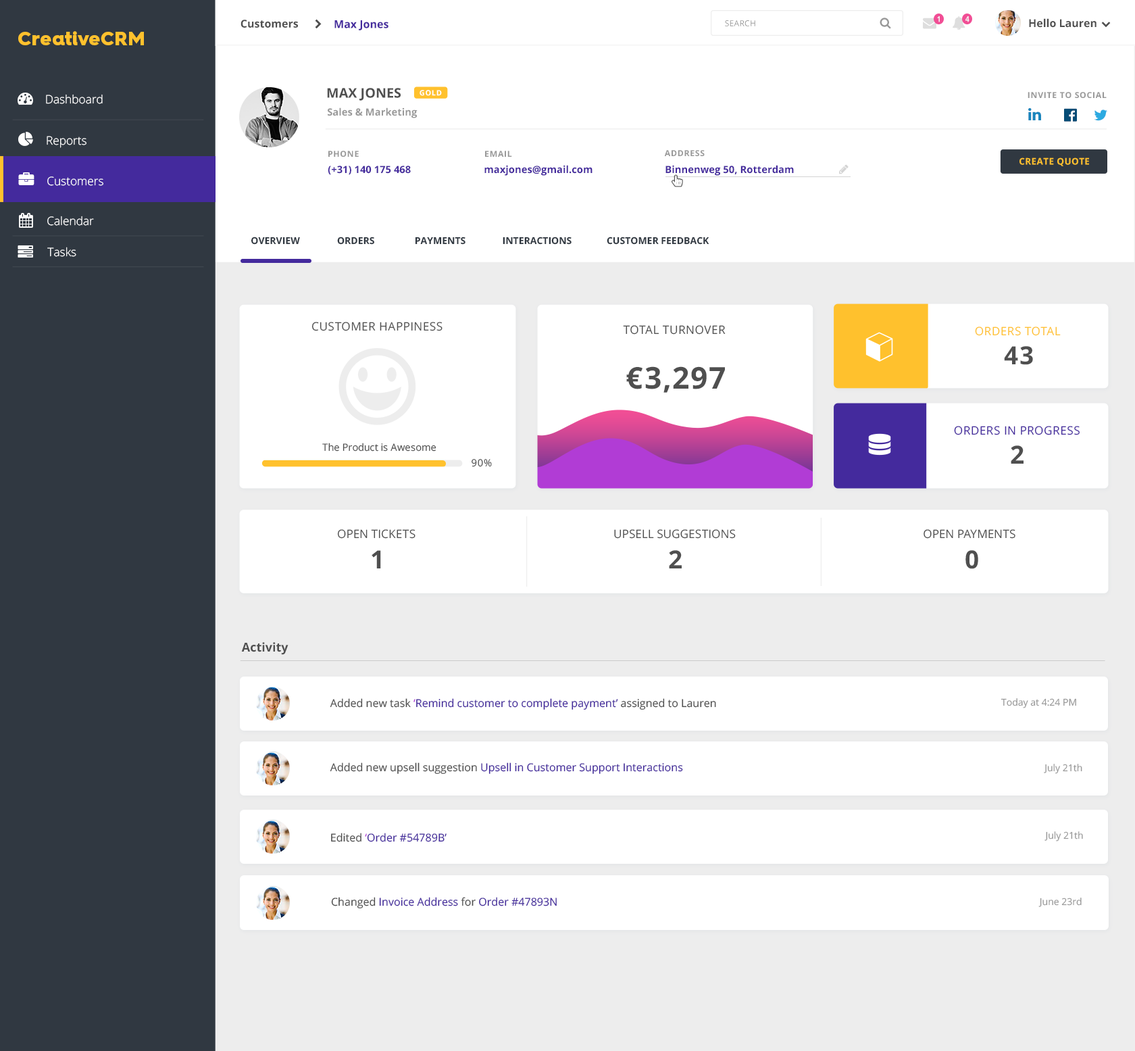
<style>
.page{position:relative;width:1135px;height:1051px;background:#ffffff}
.page>*{position:absolute;margin:0}
.t1{font:7.8px "OpenSans-Bold";color:#f4f4f4;scale:0.9 1}
.t2{font:10.8px "OpenSans-Bold";color:#4f4f4f}
.t3{font:10.8px "OpenSans-Bold";color:#442a9d}
.t4{font:8.1px "OpenSans";letter-spacing:0.025em;color:#999999;text-transform:uppercase}
.t5{font:18.9px "HurmeGeometricSans4-Black";letter-spacing:0.025em;color:#ffc12d}
.t6{font:13.4px "OpenSans-Bold";color:#4f4f4f;text-transform:uppercase}
.t7{font:7.5px "OpenSans-Bold";letter-spacing:0.05em;color:#ffffff;text-transform:uppercase}
.t8{font:11.7px "OpenSans-Light";color:#ffffff}
.t9{font:8.3px "OpenSans-Bold";letter-spacing:0.05em;color:#999999;text-transform:uppercase}
.t10{font:10px "OpenSans-Bold";color:#999999}
.t11{font:9.2px "OpenSans-Bold";letter-spacing:0.025em;color:#ffc12d;text-transform:uppercase}
.t12{font:10px "OpenSans-Bold";color:#442a9d}
.t13{font:9.5px "OpenSans-Bold";color:#303841;text-transform:uppercase}
.t14{font:11.7px "OpenSans";letter-spacing:0.025em;color:#4f4f4f;text-transform:uppercase}
.t15{font:11.7px "OpenSans";letter-spacing:0.025em;color:#ffc12d;text-transform:uppercase}
.t16{font:25px "OpenSans-Bold";letter-spacing:0.025em;color:#4f4f4f}
.t17{font:30px "OpenSans-Bold";letter-spacing:0.025em;color:#4f4f4f}
.t18{font:11.7px "OpenSans";letter-spacing:0.025em;color:#442a9d;text-transform:uppercase}
.t19{font:10px "OpenSans";color:#4f4f4f}
.t20{font:25px "OpenSans-Bold";color:#4f4f4f}
.t21{font:10px "OpenSans";letter-spacing:0.04em;color:#4f4f4f}
.t22{font:11.7px "OpenSans";color:#4f4f4f;text-transform:uppercase}
.t23{font:12.2px "OpenSans-Bold";color:#4f4f4f}
.t24{font:10.8px "OpenSans";color:#442a9d}
.t25{font:10.8px "OpenSans";color:#4f4f4f}
.t26{font:10.8px "OpenSans";color:#b13cd5}
.t27{font:9.5px "OpenSans";color:#999999}
</style>
<div class="page">
<p class="t1" style="left:937px;top:16px;width:3px;height:6px">1</p>
<p class="t1" style="left:965px;top:16px;width:5px;height:6px">4</p>
<p class="t2" style="left:241px;top:20px;width:57px;height:8px">Customers</p>
<p class="t3" style="left:334px;top:20px;width:54px;height:10px">Max Jones</p>
<p class="t4" style="left:725px;top:20px;width:30px;height:6px">Search</p>
<p class="t2" style="left:1029px;top:18px;width:68px;height:10px">Hello Lauren</p>
<p class="t5" style="left:18px;top:31px;width:126px;height:14px">CreativeCRM</p>
<p class="t6" style="left:327px;top:88px;width:74px;height:13px">Max Jones</p>
<p class="t7" style="left:420px;top:90px;width:22px;height:6px">gold</p>
<p class="t8" style="left:46px;top:94px;width:57px;height:10px">Dashboard</p>
<p class="t9" style="left:1028px;top:92px;width:79px;height:6px">Invite to social</p>
<p class="t10" style="left:328px;top:107px;width:90px;height:11px">Sales &amp; Marketing</p>
<p class="t8" style="left:47px;top:136px;width:39px;height:12px">Reports</p>
<p class="t9" style="left:664px;top:150px;width:41px;height:6px">Address</p>
<p class="t9" style="left:328px;top:151px;width:31px;height:6px">phone</p>
<p class="t9" style="left:485px;top:151px;width:27px;height:6px">email</p>
<p class="t11" style="left:1019px;top:157px;width:70px;height:9px">create quote</p>
<p class="t12" style="left:328px;top:166px;width:83px;height:9px">(+31) 140 175 468</p>
<p class="t12" style="left:484px;top:165px;width:109px;height:11px">maxjones@gmail.com</p>
<p class="t12" style="left:665px;top:165px;width:129px;height:11px">Binnenweg 50, Rotterdam</p>
<p class="t8" style="left:47px;top:176px;width:56px;height:10px">Customers</p>
<p class="t8" style="left:47px;top:216px;width:47px;height:10px">Calendar</p>
<p class="t13" style="left:251px;top:236px;width:49px;height:9px">Overview</p>
<p class="t13" style="left:337px;top:236px;width:37px;height:9px">Orders</p>
<p class="t13" style="left:415px;top:236px;width:50px;height:9px">Payments</p>
<p class="t13" style="left:503px;top:236px;width:69px;height:9px">Interactions</p>
<p class="t13" style="left:607px;top:236px;width:102px;height:9px">Customer Feedback</p>
<p class="t8" style="left:47px;top:247px;width:29px;height:10px">Tasks</p>
<p class="t14" style="left:311px;top:322px;width:132px;height:9px">customer happiness</p>
<p class="t14" style="left:623px;top:325px;width:103px;height:9px">total turnover</p>
<p class="t15" style="left:975px;top:326px;width:86px;height:10px">orders total</p>
<p class="t16" style="left:1004px;top:346px;width:29px;height:19px">43</p>
<p class="t17" style="left:626px;top:366px;width:99px;height:27px">€3,297</p>
<p class="t18" style="left:954px;top:426px;width:126px;height:9px">orders in Progress</p>
<p class="t19" style="left:322px;top:443px;width:114px;height:8px">The Product is Awesome</p>
<p class="t20" style="left:1011px;top:445px;width:13px;height:18px">2</p>
<p class="t21" style="left:472px;top:459px;width:20px;height:8px">90%</p>
<p class="t22" style="left:337px;top:529px;width:79px;height:9px">open tickets</p>
<p class="t22" style="left:614px;top:529px;width:122px;height:9px">Upsell suggestions</p>
<p class="t22" style="left:924px;top:529px;width:91px;height:9px">open payments</p>
<p class="t20" style="left:372px;top:550px;width:9px;height:18px">1</p>
<p class="t20" style="left:669px;top:550px;width:13px;height:18px">2</p>
<p class="t20" style="left:965px;top:550px;width:13px;height:19px">0</p>
<p class="t23" style="left:241px;top:642px;width:47px;height:13px">Activity</p>
<p class="t24" style="left:330px;top:698px;width:386px;height:11px"><span class="t25">Added new task </span><span class="t26">‘</span>Remind customer to complete payment’ <span class="t25">assigned to Lauren</span></p>
<p class="t27" style="left:1001px;top:698px;width:75px;height:10px">Today at 4:24 PM</p>
<p class="t24" style="left:330px;top:762px;width:353px;height:12px"><span class="t25">Added new upsell suggestion </span>Upsell in Customer Support Interactions</p>
<p class="t27" style="left:1044px;top:763px;width:38px;height:11px">July 21th</p>
<p class="t24" style="left:331px;top:832px;width:116px;height:10px"><span class="t25">Edited</span><span class="t26"> ‘</span>Order #54789B’</p>
<p class="t27" style="left:1044px;top:831px;width:39px;height:10px">July 21th</p>
<p class="t24" style="left:331px;top:897px;width:226px;height:11px"><span class="t25">Changed </span>Invoice Address <span class="t25">for </span>Order #47893N</p>
<p class="t27" style="left:1038px;top:897px;width:44px;height:10px">June 23rd</p>
</div>
